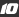
<style>
.page{position:relative;width:19px;height:17px;background:#333333}
.page>*{position:absolute;margin:0}
.t1{font:15px "InfiniteJustice";color:#ffffff;font-weight:bold}
</style>
<div class="page">
<p class="t1" style="left:0px;top:3px;width:19px;height:11px">10</p>
</div>
